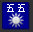
<style>
.page{position:relative;width:33px;height:32px;background:#000090}
.page>*{position:absolute;margin:0}
.t1{font:10.4px "SimSun";color:#ffffff}
</style>
<div class="page">
<p class="t1" style="left:7px;top:4px;width:18px;height:8px">五五</p>
</div>
